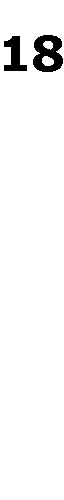
<style>
.page{position:relative;width:64px;height:500px;background:#ffffff}
.page>*{position:absolute;margin:0}
.t1{font:48px "Verdana-Bold";color:#000000}
</style>
<div class="page">
<p class="t1" style="left:4px;top:35px;width:59px;height:37px">18</p>
</div>
